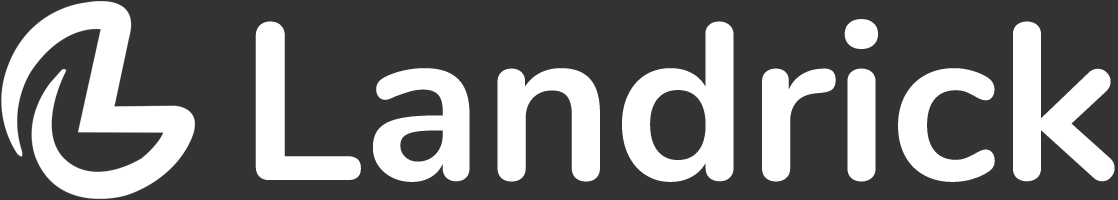
<style>
.page{position:relative;width:1118px;height:200px;background:#333333}
.page>*{position:absolute;margin:0}
.t1{font:223px "Nunito-Bold";color:#ffffff}
</style>
<div class="page">
<p class="t1" style="left:255px;top:19px;width:860px;height:163px">Landrick</p>
</div>
